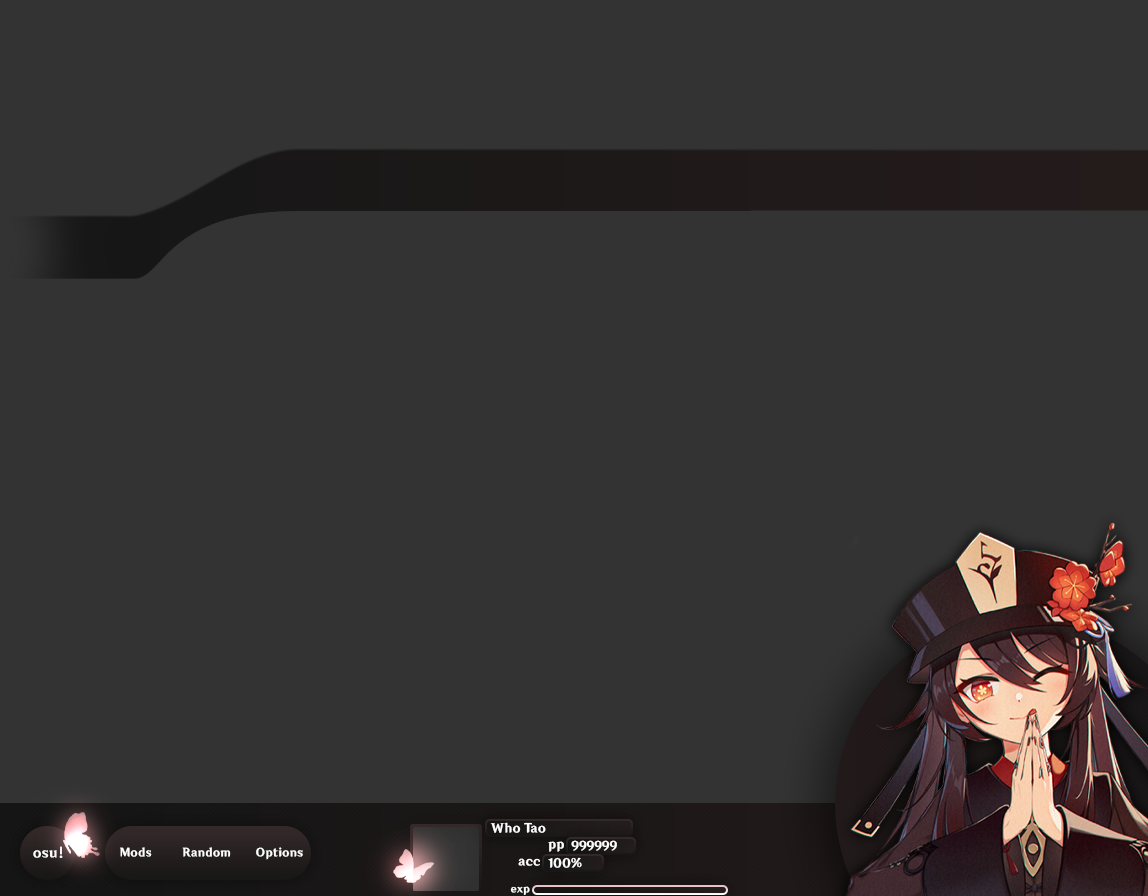
<style>
.page{position:relative;width:1148px;height:896px;background:#333333}
.page>*{position:absolute;margin:0}
.t1{font:12px "Default_SC-85W";color:#ffffff}
.t2{font:13px "Default_SC-85W";color:#ffffff}
.t3{font:11px "Default_SC-85W";color:#ffffff}
.t4{font:10px "Default_SC-85W";color:#ffffff}
</style>
<div class="page">
<p class="t1" style="left:490px;top:822px;width:56px;height:11px">Who Tao</p>
<p class="t2" style="left:33px;top:846px;width:30px;height:12px">osu!</p>
<p class="t1" style="left:548px;top:841px;width:16px;height:11px">pp</p>
<p class="t1" style="left:571px;top:840px;width:46px;height:11px">999999</p>
<p class="t3" style="left:120px;top:847px;width:32px;height:10px">Mods</p>
<p class="t3" style="left:182px;top:847px;width:49px;height:10px">Random</p>
<p class="t3" style="left:256px;top:847px;width:47px;height:13px">Options</p>
<p class="t1" style="left:548px;top:857px;width:34px;height:11px">100%</p>
<p class="t1" style="left:518px;top:858px;width:22px;height:8px">acc</p>
<p class="t4" style="left:510px;top:886px;width:20px;height:9px">exp</p>
</div>
